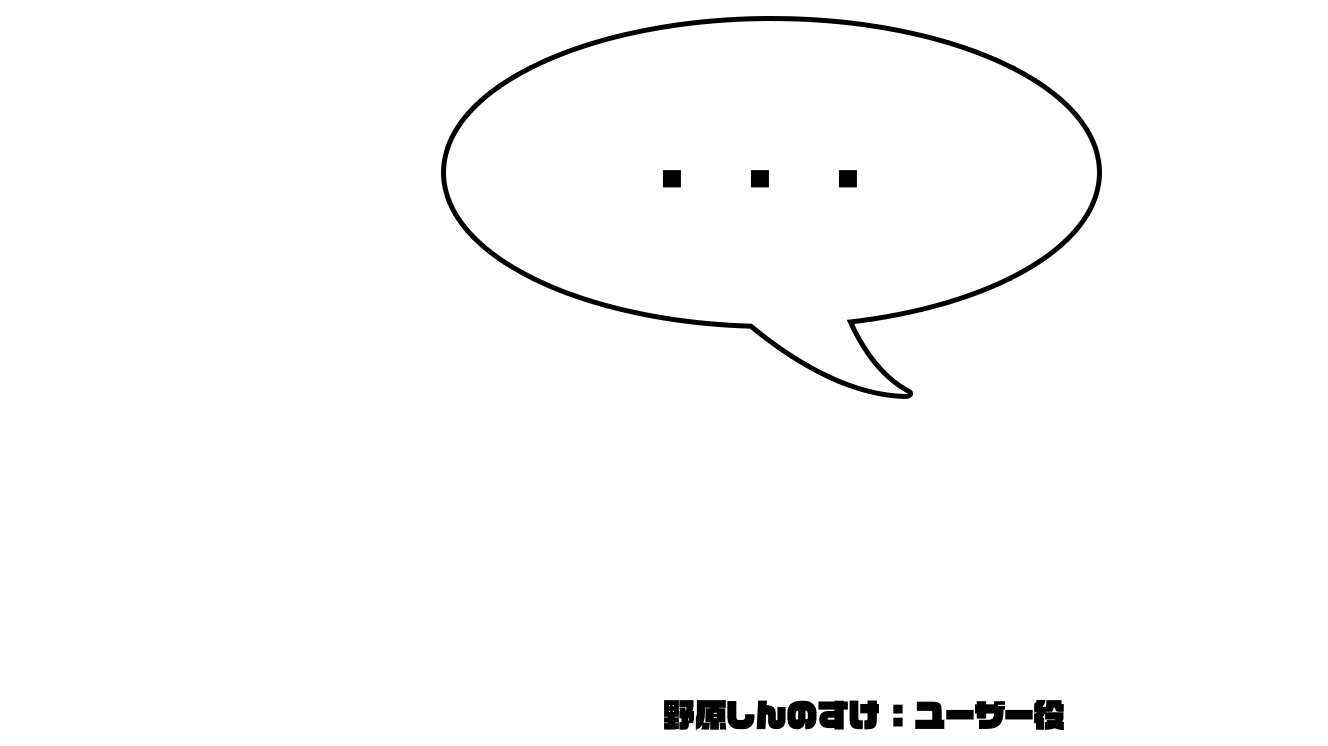
<style>
.page{position:relative;width:1328px;height:746px;background:#ffffff}
.page>*{position:absolute;margin:0}
.t1{font:60px "VDL-LogoJrBlack-Black";letter-spacing:-0.016em;color:#000000}
.t2{font:32px "VDL-LogoJrBlack-Black";letter-spacing:-0.016em;color:#000000}
</style>
<div class="page">
<p class="t1" style="left:662px;top:170px;width:195px;height:18px">・　・　・</p>
<p class="t2" style="left:664px;top:699px;width:400px;height:32px">野原しんのすけ ： ユーザー役</p>
</div>
